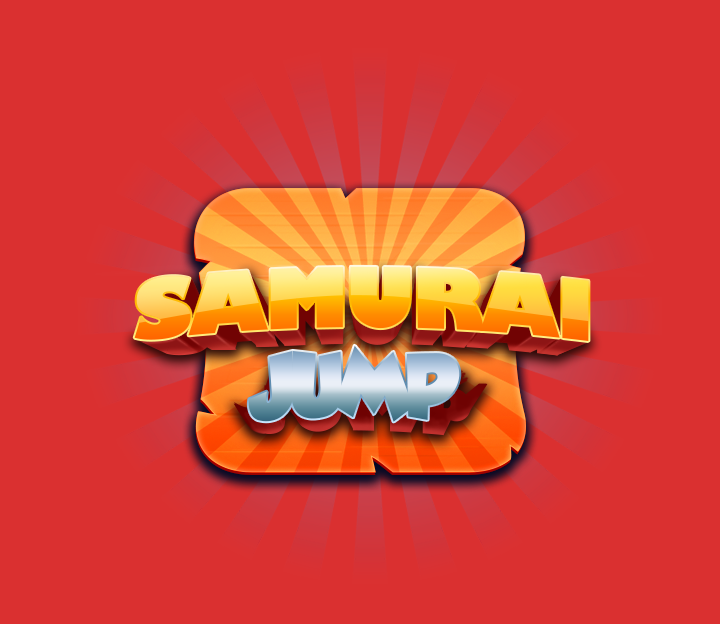
<style>
.page{position:relative;width:720px;height:624px;background:#da3030}
.page>*{position:absolute;margin:0}
.t1{font:80px "GillSans-UltraBold";letter-spacing:-0.04em}
.t2{font:80px "GROBOLD";letter-spacing:-0.06em}
</style>
<div class="page">
<p class="t1" style="left:134px;top:266px;width:455px;height:75px">SAMURAI</p>
<p class="t2" style="left:248px;top:345px;width:212px;height:77px">JUMP</p>
</div>
